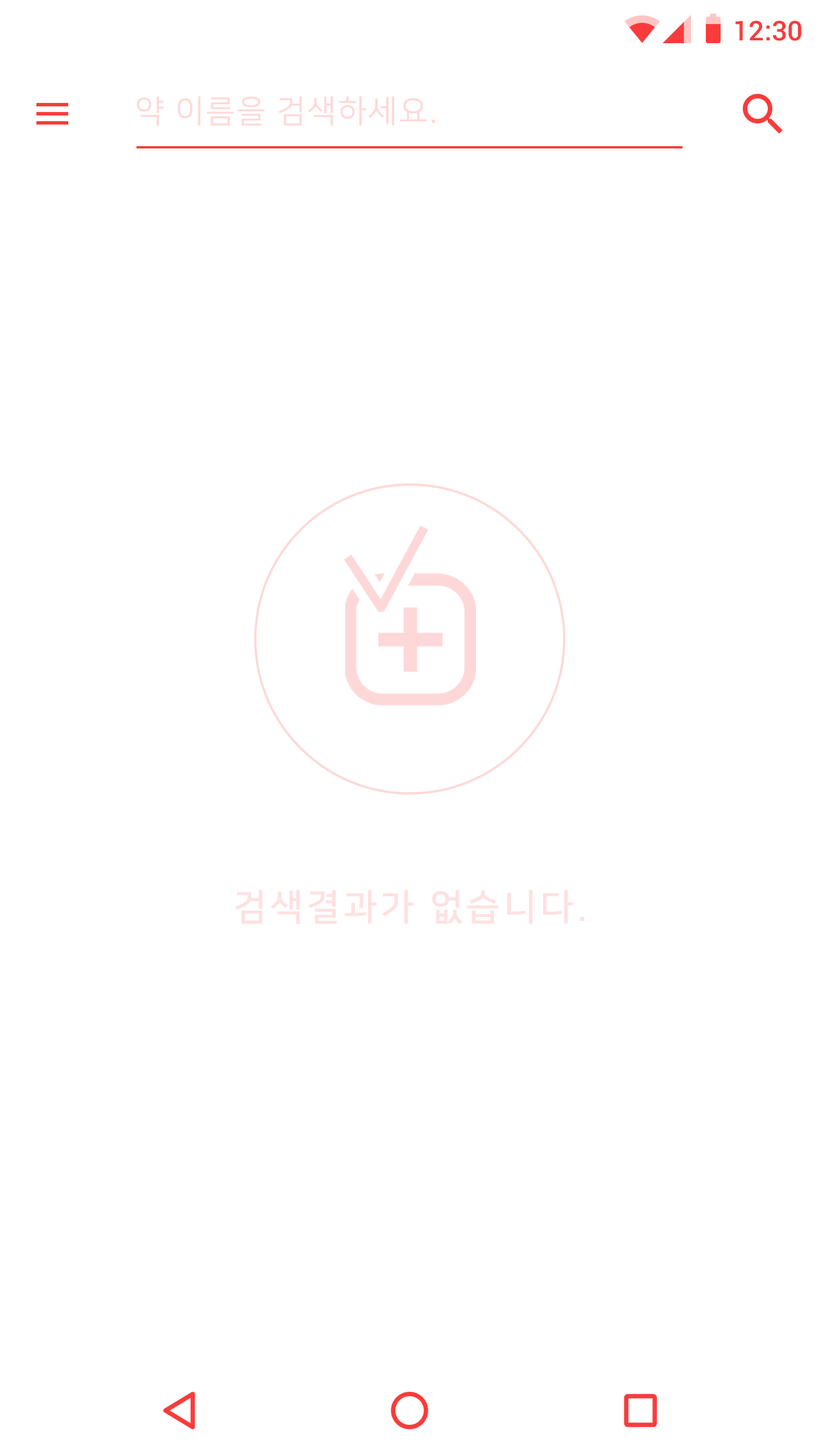
<style>
.page{position:relative;width:819px;height:1456px;background:#ffffff}
.page>*{position:absolute;margin:0}
.t1{font:27.3px "Roboto-Medium";color:#fa3b3b}
.t2{font:31.8px "NanumSquareR";letter-spacing:0.05em;color:#fed8d8}
.t3{font:36.4px "NanumSquareB";letter-spacing:0.1em;color:#fee1e1}
</style>
<div class="page">
<p class="t1" style="left:735px;top:20px;width:66px;height:21px">12:30</p>
<p class="t2" style="left:136px;top:96px;width:299px;height:30px">약 이름을 검색하세요.</p>
<p class="t3" style="left:235px;top:890px;width:349px;height:34px">검색결과가 없습니다.</p>
</div>
